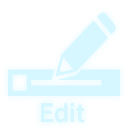
<style>
.page{position:relative;width:128px;height:128px;background:#ffffff}
.page>*{position:absolute;margin:0}
.t1{font:28px "FranklinGothic-Medium";color:#d6f7ff}
</style>
<div class="page">
<p class="t1" style="left:41px;top:103px;width:44px;height:20px">Edit</p>
<p class="t1" style="left:41px;top:103px;width:44px;height:20px">Edit</p>
</div>
